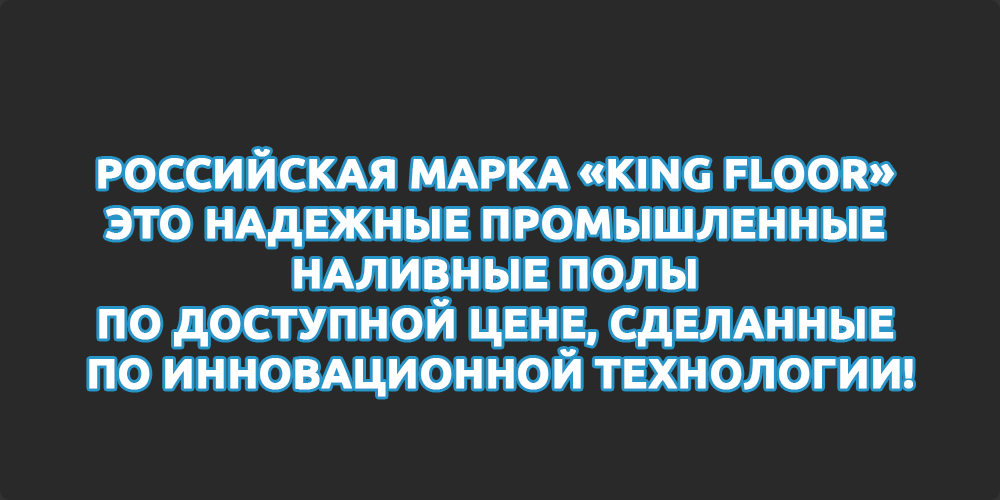
<style>
.page{position:relative;width:1000px;height:500px;background:#292929}
.page>*{position:absolute;margin:0}
.t1{font:41.7px "Ubuntu-Bold";color:#ffffff;text-transform:uppercase;font-weight:bold}
</style>
<div class="page">
<p class="t1" style="left:89px;top:149px;width:824px;height:248px;text-align:center">Российская марка «KING FLOOR» <br>это надежные промышленные <br>наливные полы <br>по доступной цене, сделанные <br>по инновационной технологии!</p>
</div>
